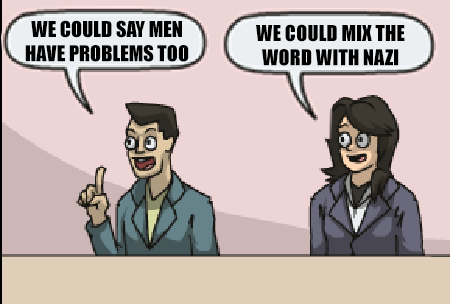
<style>
.page{position:relative;width:450px;height:304px;background:#eed5d5}
.page>*{position:absolute;margin:0}
.t1{font:15.2px "Impact";color:#000000}
</style>
<div class="page">
<p class="t1" style="left:25px;top:20px;width:164px;height:42px;text-align:center">WE COULD SAY MEN<br>HAVE PROBLEMS TOO</p>
<p class="t1" style="left:256px;top:24px;width:149px;height:42px;text-align:center">WE COULD MIX THE<br>WORD WITH NAZI</p>
</div>
